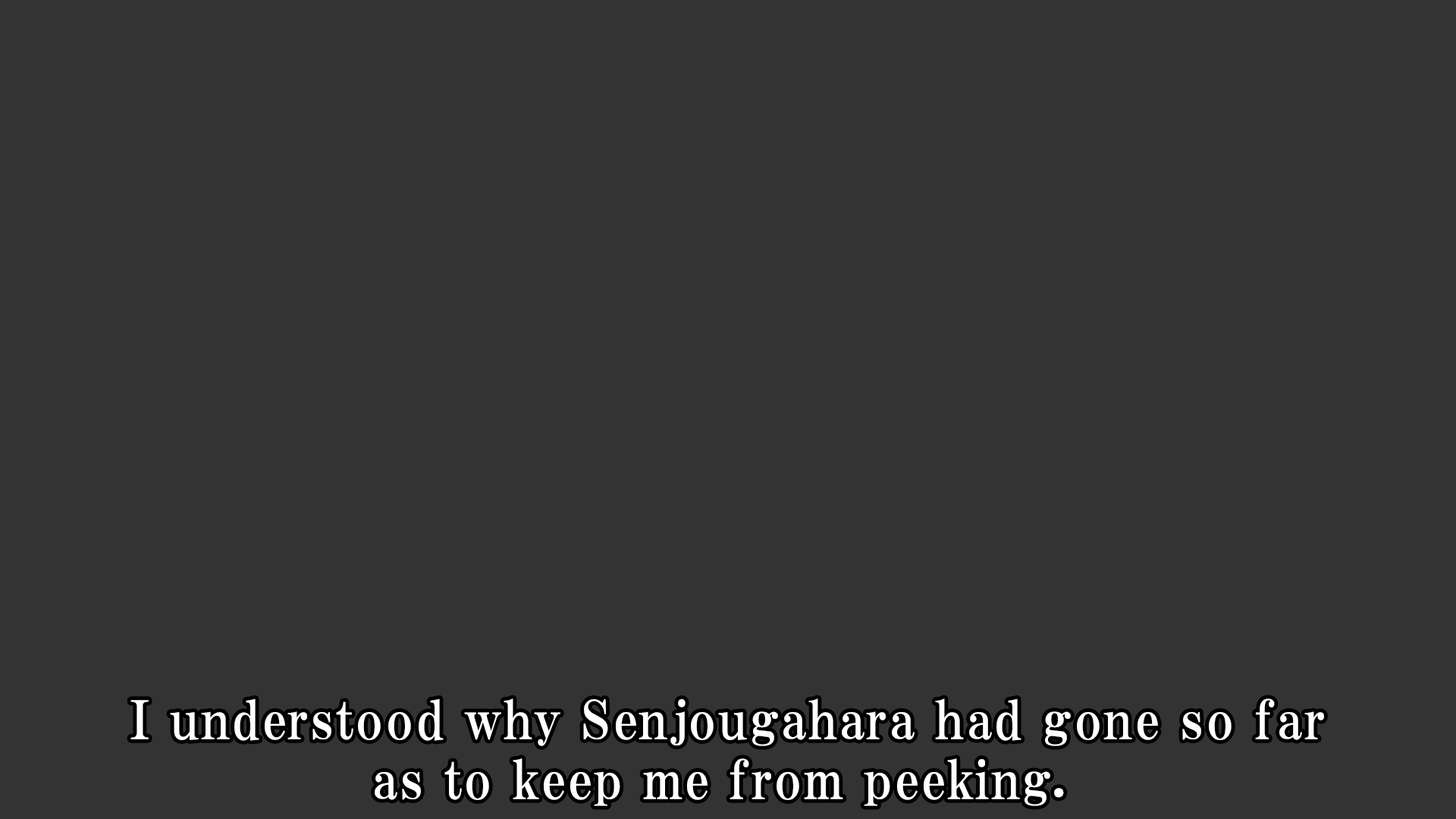
<style>
.page{position:relative;width:1456px;height:819px;background:#333333}
.page>*{position:absolute;margin:0}
.t1{font:53.1px/59.9px "HGPMinchoE";letter-spacing:0.025em;color:#ffffff}
</style>
<div class="page">
<p class="t1" style="left:130px;top:698px;width:1194px;height:108px;text-align:center">I understood why Senjougahara had gone so far<br>as to keep me from peeking.</p>
</div>
